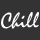
<style>
.page{position:relative;width:40px;height:40px;background:#333333}
.page>*{position:absolute;margin:0}
.t1{font:23px "Mistral";color:#ffffff}
</style>
<div class="page">
<p class="t1" style="left:1px;top:12px;width:38px;height:17px">Chill</p>
</div>
